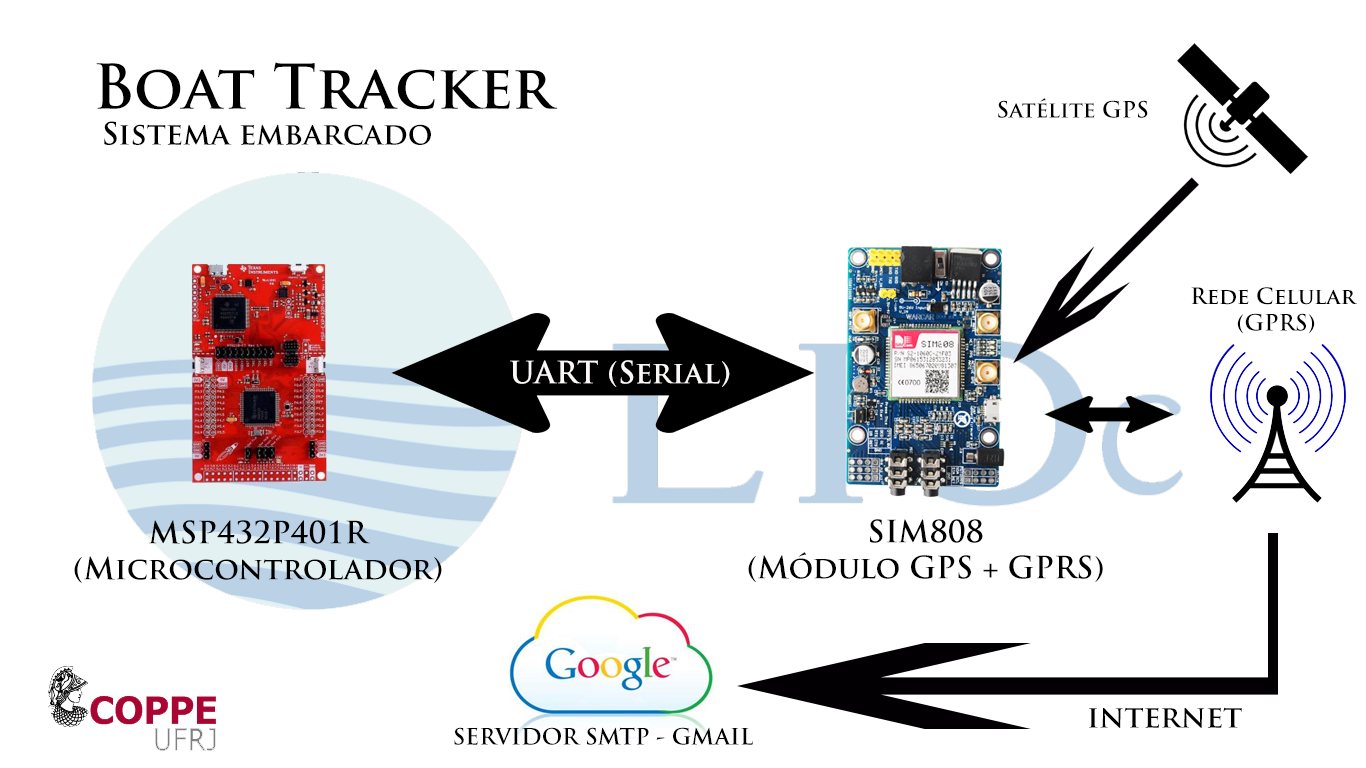
<style>
.page{position:relative;width:1366px;height:768px;background:#ffffff}
.page>*{position:absolute;margin:0}
.t1{font:30px "TrajanPro-Bold";color:#000000}
.t2{font:60px "TrajanPro-Bold";color:#000000}
.t3{font:22px "TrajanPro-Bold";color:#000002}
.t4{font:30px "TrajanPro-Bold";color:#fbf7f7}
</style>
<div class="page">
<p class="t1" style="left:96px;top:62px;width:462px;height:83px"><span class="t2">Boat Tracker <br></span> Sistema embarcado</p>
<p class="t3" style="left:998px;top:98px;width:150px;height:20px">Satélite GPS</p>
<p class="t3" style="left:1191px;top:287px;width:166px;height:47px;text-align:center">Rede Celular<br> (GPRS)</p>
<p class="t4" style="left:510px;top:360px;width:220px;height:27px">UART (Serial)</p>
<p class="t1" style="left:74px;top:520px;width:368px;height:63px;text-align:center">MSP432P401R<br>(Microcontrolador)</p>
<p class="t1" style="left:748px;top:519px;width:355px;height:63px;text-align:center">SIM808<br>(Módulo GPS + GPRS)</p>
<p class="t1" style="left:1089px;top:707px;width:153px;height:21px">internet</p>
<p class="t3" style="left:454px;top:727px;width:299px;height:18px">SERVIDOR SMTP - GMAIL</p>
</div>
